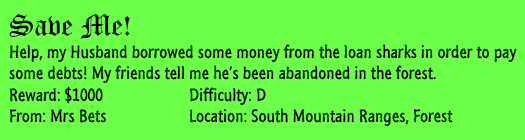
<style>
.page{position:relative;width:525px;height:140px;background:#6cff47}
.page>*{position:absolute;margin:0}
.t1{font:18px "SegoeMarker";color:#000000}
.t2{font:30px "OldEnglishTextMT";color:#000000}
</style>
<div class="page">
<p class="t1" style="left:9px;top:14px;width:508px;height:113px"><span class="t2">Save Me!<br></span>Help, my Husband borrowed some money from the loan sharks in order to pay<br>some debts! My friends tell me he’s been abandoned in the forest.<br>Reward: $1000   Difficulty: D<br>From: Mrs Bets   Location: South Mountain Ranges, Forest</p>
</div>
